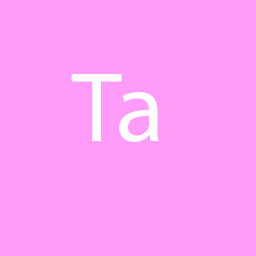
<style>
.page{position:relative;width:256px;height:256px;background:#ff9bf9}
.page>*{position:absolute;margin:0}
.t1{font:100px "MyriadPro-Regular";color:#ffffff}
</style>
<div class="page">
<p class="t1" style="left:71px;top:74px;width:88px;height:68px">Ta</p>
</div>
